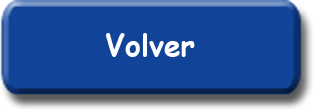
<style>
.page{position:relative;width:314px;height:110px;background:#114499}
.page>*{position:absolute;margin:0}
.t1{font:30px "ComicSansMS-Bold";color:#ffffff}
</style>
<div class="page">
<p class="t1" style="left:106px;top:33px;width:89px;height:24px">Volver</p>
</div>
